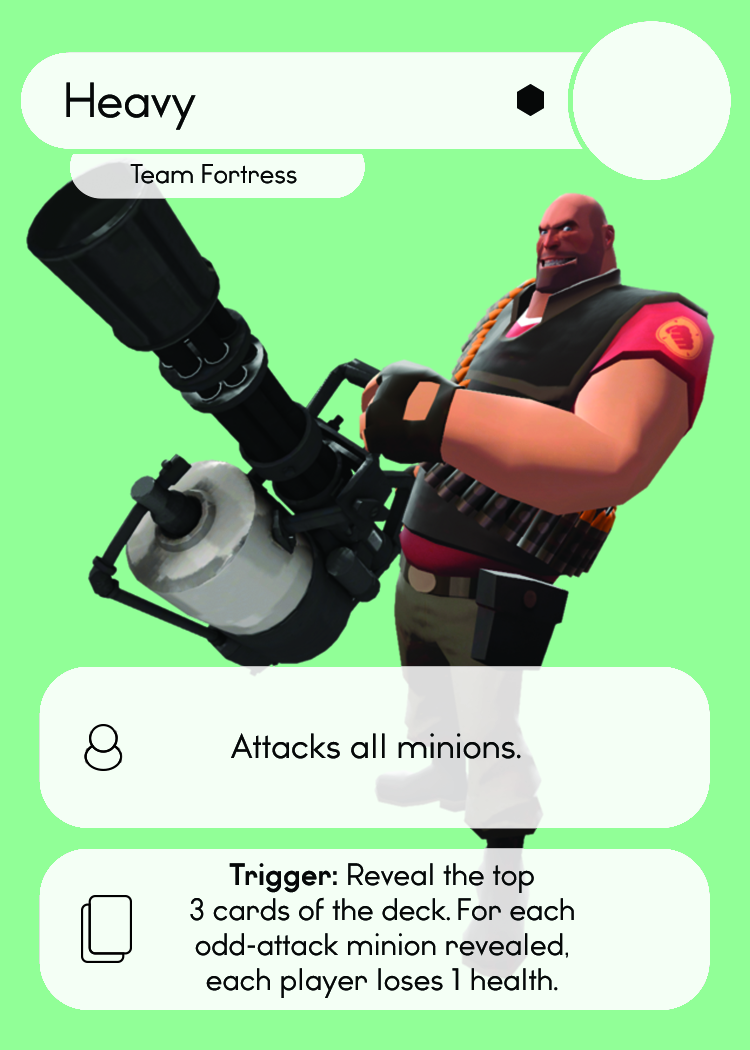
<style>
.page{position:relative;width:750px;height:1050px;background:#91ff97}
.page>*{position:absolute;margin:0}
.t1{font:46.7px "WatchwordRegularDemo";color:#060808}
.t2{font:25.5px "WatchwordRegularDemo";color:#060808}
.t3{font:33.3px "WatchwordRegularDemo";color:#060808}
.t4{font:33.3px "Dosis-Medium";color:#060808}
.t5{font:29.2px "WatchwordRegularDemo";color:#060808}
.t6{font:29.2px "WatchwordBoldDemo";color:#060808}
.t7{font:29.2px "Dosis-Medium";color:#060808}
</style>
<div class="page">
<p class="t1" style="left:66px;top:82px;width:130px;height:48px">Heavy</p>
<p class="t2" style="left:130px;top:164px;width:167px;height:20px">Team Fortress</p>
<p class="t3" style="left:231px;top:733px;width:290px;height:26px">Attacks all minions<span class="t4">.</span></p>
<p class="t5" style="left:190px;top:863px;width:384px;height:135px;text-align:center"><span class="t6">Trigger: </span>Reveal the top<br>3 cards of the deck<span class="t7">. </span>For each<br>odd-attack minion revealed,<br>each player loses 1 health<span class="t7">.</span></p>
</div>
